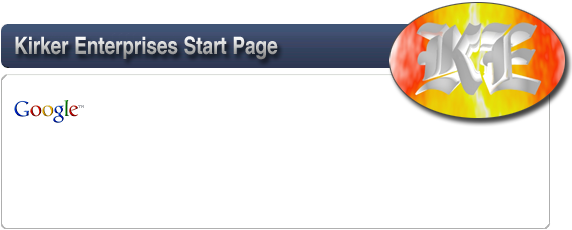
<style>
.page{position:relative;width:572px;height:230px;background:#ffffff}
.page>*{position:absolute;margin:0}
.t1{font:24px "AGHelveticaCyrBold";letter-spacing:-0.01em;scale:0.8 1}
</style>
<div class="page">
<p class="t1" style="left:15px;top:36px;width:263px;height:24px">Kirker Enterprises Start Page</p>
</div>
